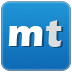
<style>
.page{position:relative;width:72px;height:72px}
.page>*{position:absolute;margin:0}
.t1{font:40px "ErasITC-Bold";letter-spacing:0.03em;color:#ffffff}
.t2{font:40px "ErasITC-Bold";letter-spacing:0.03em;color:#dddddd}
</style>
<div class="page">
<p class="t1" style="left:8px;top:20px;width:54px;height:27px">m<span class="t2">t</span></p>
</div>
